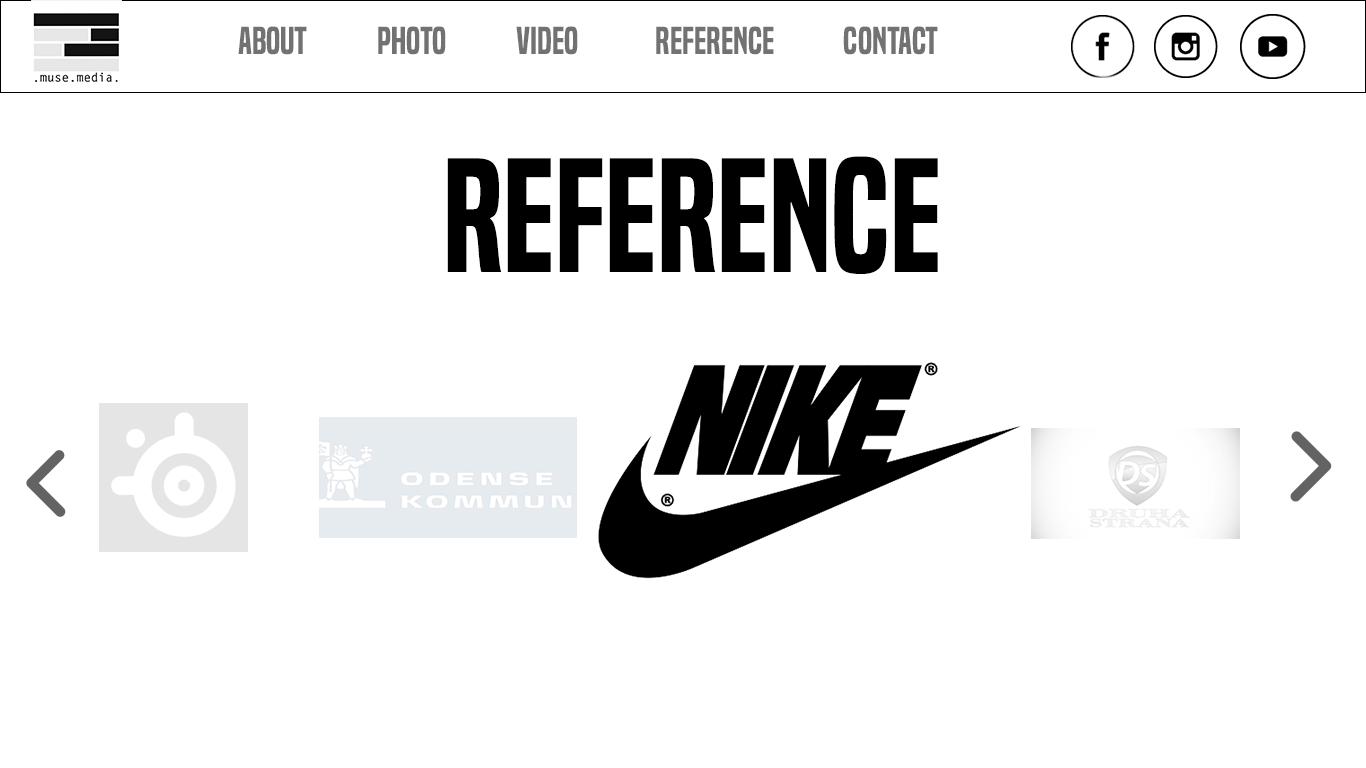
<style>
.page{position:relative;width:1366px;height:768px;background:#ffffff}
.page>*{position:absolute;margin:0}
.t1{font:36px "BuiltTitlingSb-Regular";color:#727272}
.t2{font:150px "BuiltTitlingSb-Regular";color:#000000}
</style>
<div class="page">
<p class="t1" style="left:238px;top:26px;width:69px;height:29px">About</p>
<p class="t1" style="left:378px;top:26px;width:68px;height:29px">Photo</p>
<p class="t1" style="left:516px;top:26px;width:62px;height:29px">Video</p>
<p class="t1" style="left:656px;top:26px;width:118px;height:29px">Reference</p>
<p class="t1" style="left:843px;top:26px;width:95px;height:29px">Contact</p>
<p class="t2" style="left:447px;top:156px;width:491px;height:118px">Reference</p>
</div>
